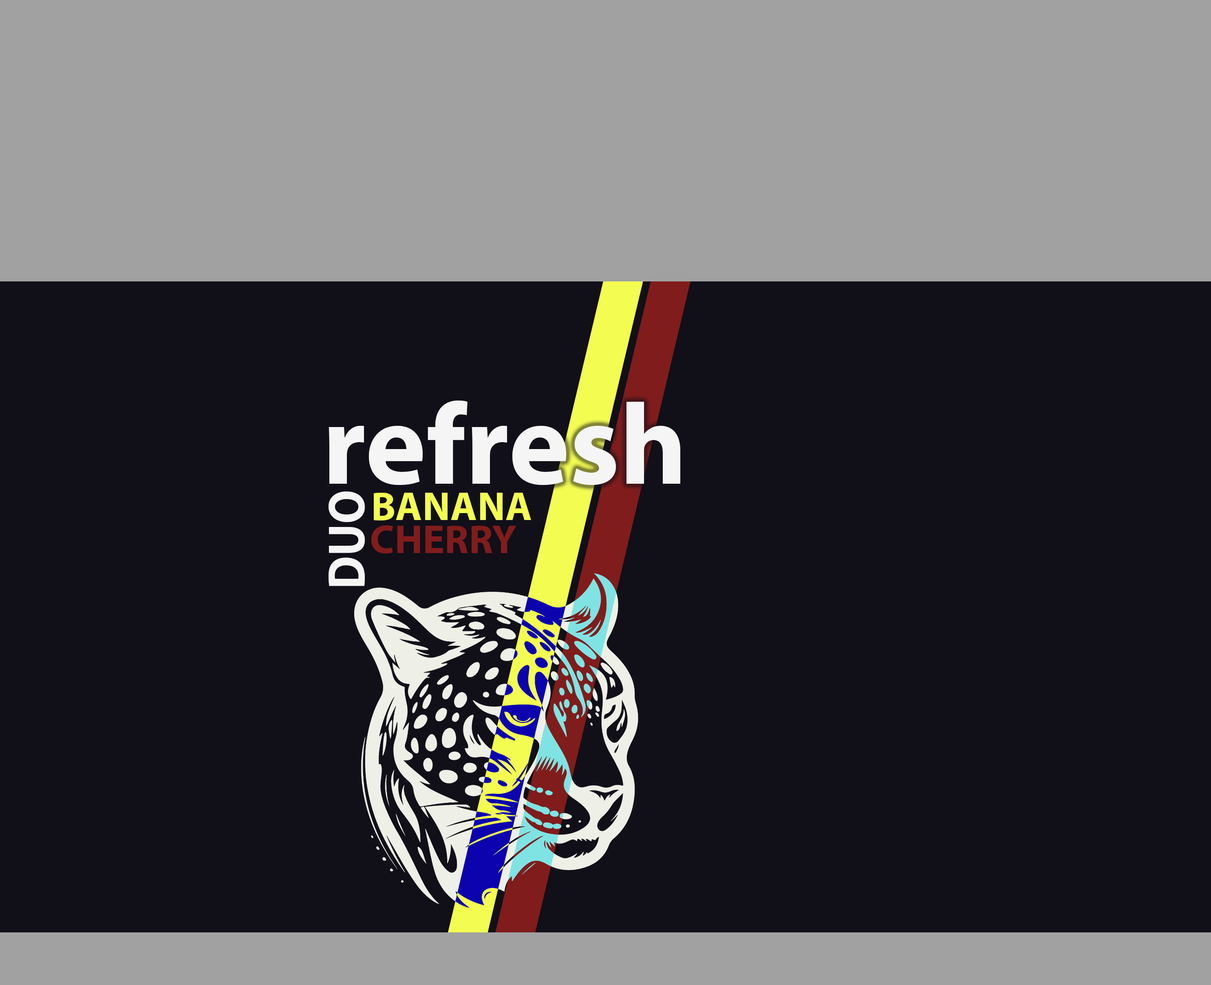
<style>
.page{position:relative;width:1211px;height:985px;background:#110f18}
.page>*{position:absolute;margin:0}
.t1{font:115.5px "MyriadPro-Bold";color:#f5f5f5}
.t2{font:52.9px "MyriadPro-Bold";color:#f5f5f5;scale:0.89 1}
.t3{font:40.8px "MyriadPro-Bold";color:#f3fd51}
.t4{font:40.8px "MyriadPro-Bold";color:#801c1c}
</style>
<div class="page">
<p class="t1" style="left:329px;top:400px;width:351px;height:85px">refresh</p>
<p class="t2" style="left:329px;top:491px;width:36px;height:95px;rotate:-90deg">DUO</p>
<p class="t3" style="left:374px;top:492px;width:157px;height:28px">BANANA</p>
<p class="t4" style="left:371px;top:525px;width:146px;height:28px">CHERRY</p>
</div>
